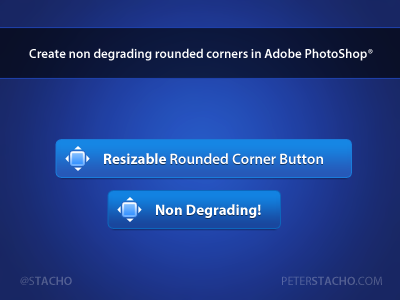
<style>
.page{position:relative;width:400px;height:300px}
.page>*{position:absolute;margin:0}
.t1{font:13px "MyriadPro-Semibold";color:#ffffff}
.t2{font:15px "MyriadPro-Semibold";color:#ffffff}
.t3{font:15px "MyriadPro-Bold";color:#ffffff}
.t4{font:12px "MyriadPro-Semibold";color:#535f92;text-transform:uppercase}
.t5{font:12px "MyriadPro-Regular";color:#535f92;text-transform:uppercase}
.t6{font:12px "MyriadPro-Semibold";color:#535f93;text-transform:uppercase}
.t7{font:12px "MyriadPro-Regular";color:#535f93;text-transform:uppercase}
</style>
<div class="page">
<p class="t1" style="left:29px;top:48px;width:344px;height:13px">Create non degrading rounded corners in Adobe PhotoShop®</p>
<p class="t2" style="left:104px;top:153px;width:219px;height:11px"><span class="t3">Resizable</span> Rounded Corner Button</p>
<p class="t3" style="left:156px;top:204px;width:105px;height:14px">Non Degrading!</p>
<p class="t4" style="left:20px;top:276px;width:52px;height:9px"><span class="t5">@S</span>tacho</p>
<p class="t6" style="left:282px;top:276px;width:100px;height:9px"><span class="t7">Peter</span>Stacho<span class="t7">.com</span></p>
</div>
